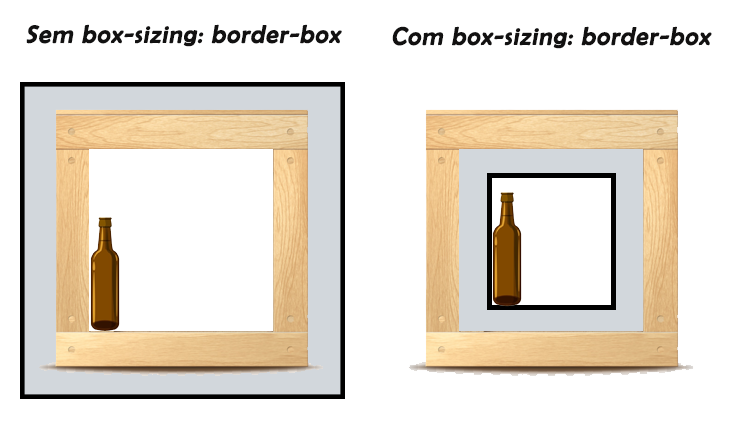
<style>
.page{position:relative;width:729px;height:437px;background:#ffffff}
.page>*{position:absolute;margin:0}
.t1{font:25px "BerlinSansFB-Reg";letter-spacing:0.025em;color:#121111;font-weight:bold;font-style:italic}
</style>
<div class="page">
<p class="t1" style="left:26px;top:24px;width:316px;height:23px">Sem box-sizing: border-box</p>
<p class="t1" style="left:392px;top:26px;width:320px;height:23px">Com box-sizing: border-box</p>
</div>
